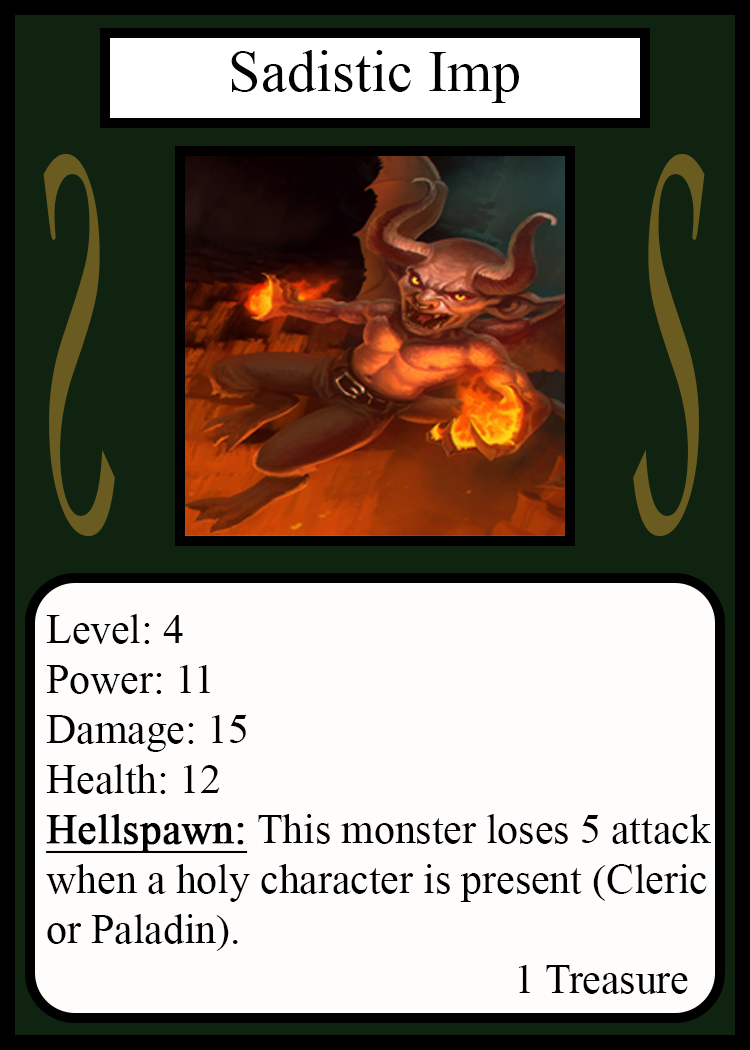
<style>
.page{position:relative;width:750px;height:1050px;background:#fffcfc}
.page>*{position:absolute;margin:0}
.t1{font:58.3px "TimesNewRomanPSMT";color:#010101}
.t2{font:548.5px "Apple-Chancery";color:#6a5c21;scale:0.27 1}
.t3{font:548.2px "Apple-Chancery";color:#6a5c21;scale:0.27 1}
.t4{font:41.7px "TimesNewRomanPSMT";color:#000000}
.t5{font:41.7px "TimesNewRomanPSMT";color:#000000;font-weight:bold;text-decoration:underline}
</style>
<div class="page">
<p class="t1" style="left:231px;top:50px;width:288px;height:53px">Sadistic Imp</p>
<p class="t2" style="left:43px;top:154px;width:72px;height:382px;rotate:180deg">S</p>
<p class="t3" style="left:633px;top:154px;width:72px;height:382px">S</p>
<p class="t4" style="left:46px;top:614px;width:665px;height:380px">Level: 4<br>Power: 11<br>Damage: 15<br>Health: 12<br><span class="t5">Hellspawn:</span> This monster loses 5 attack<br>when a holy character is present (Cleric<br>or Paladin).<br>             1 Treasure</p>
</div>
